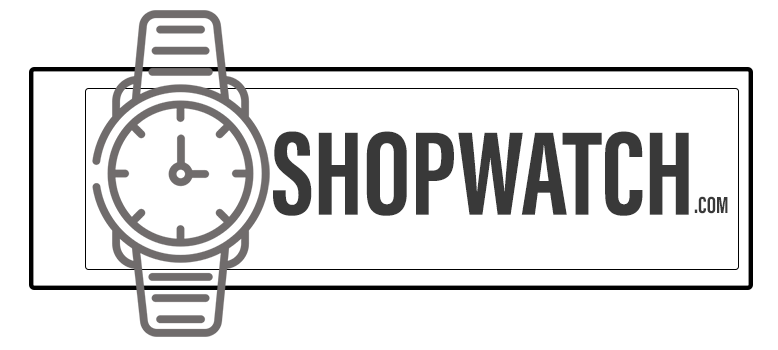
<style>
.page{position:relative;width:778px;height:350px;background:#ffffff}
.page>*{position:absolute;margin:0}
.t1{font:122.3px "AcuminConcept-ExtraCondensedBold";color:#393939}
.t2{font:24px "AcuminConcept-ExtraCondensedBold";color:#393939}
</style>
<div class="page">
<p class="t1" style="left:273px;top:131px;width:416px;height:85px">SHOPWATCH</p>
<p class="t2" style="left:694px;top:196px;width:34px;height:18px">.COM</p>
</div>
